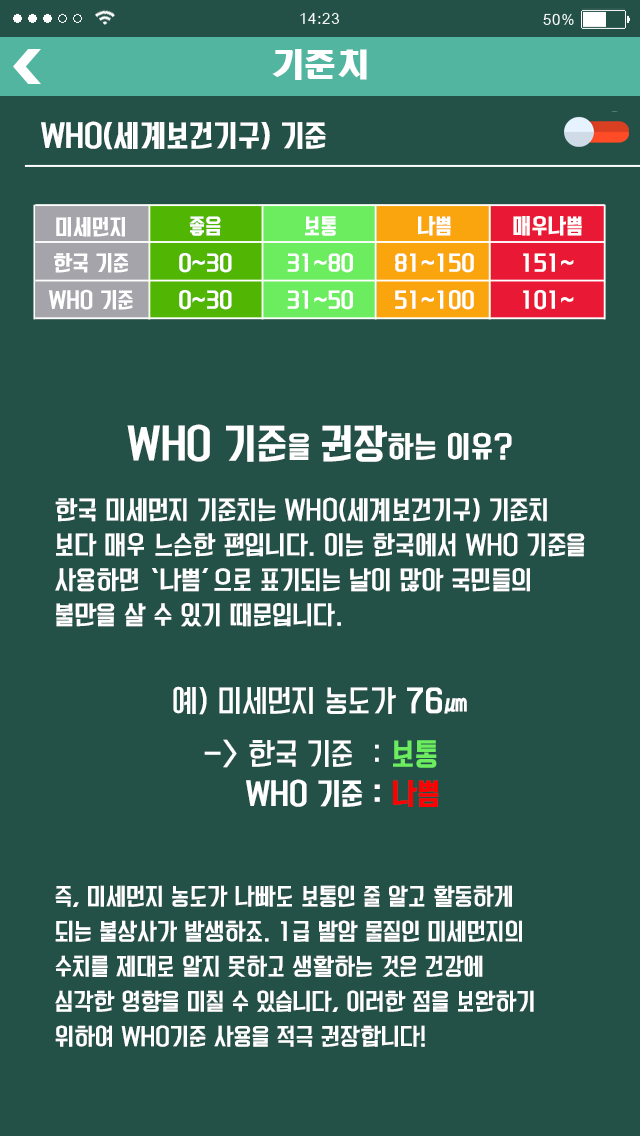
<style>
.page{position:relative;width:640px;height:1136px;background:#245147}
.page>*{position:absolute;margin:0}
.t1{font:32px "HeadlineR-HM";color:#ffffff}
.t2{font:28px "KoreanYNMYT-B";color:#ffffff}
.t3{font:20.2px/36.8px "KoreanYNMYT-B";color:#ffffff}
.t4{font:38px "KoreanYNMYT-B";color:#ffffff}
.t5{font:24px/35px "KoreanYNMYT-M";color:#ffffff}
.t6{font:28px "KoreanYNMYT-L";color:#ffffff}
.t7{font:28px "KoreanYNMYT-L";color:#ffffff;font-weight:bold}
.t8{font:24px "KoreanYNMYT-L";letter-spacing:0.025em;color:#ffffff;font-weight:bold}
.t9{font:28px "KoreanYNMYT-L";color:#6ced5f;font-weight:bold}
.t10{font:28px "KoreanYNMYT-B";color:#ff0000}
.t11{font:22px/35px "KoreanYNMYT-M";color:#ffffff}
</style>
<div class="page">
<p class="t1" style="left:272px;top:49px;width:95px;height:31px">기준치</p>
<p class="t2" style="left:41px;top:121px;width:285px;height:29px">WHO(세계보건기구) 기준</p>
<p class="t3" style="left:48px;top:217px;width:85px;height:93px;text-align:center">미세먼지<br>한국 기준<br>WHO 기준</p>
<p class="t3" style="left:179px;top:216px;width:53px;height:94px;text-align:center">좋음<br>0~30<br>0~30</p>
<p class="t3" style="left:287px;top:216px;width:66px;height:94px;text-align:center">보통<br>31~80<br>31~50</p>
<p class="t3" style="left:395px;top:216px;width:79px;height:94px;text-align:center">나쁨<br>81~150<br>51~100</p>
<p class="t3" style="left:513px;top:216px;width:69px;height:94px;text-align:center">매우나쁨<br>151~<br>101~</p>
<p class="t4" style="left:127px;top:424px;width:385px;height:38px">WHO 기준<span class="t2">을 </span>권장<span class="t2">하는 이유?</span></p>
<p class="t5" style="left:55px;top:497px;width:530px;height:130px">한국 미세먼지 기준치는 WHO(세계보건기구) 기준치<br>보다 매우 느슨한 편입니다. 이는 한국에서 WHO 기준을<br>사용하면 ‘나쁨’으로 표기되는 날이 많아 국민들의<br>불만을 살 수 있기 때문입니다.</p>
<p class="t6" style="left:173px;top:686px;width:294px;height:29px">예) 미세먼지 농도가 <span class="t7">76</span><span class="t8">㎛</span></p>
<p class="t6" style="left:204px;top:739px;width:233px;height:29px">-&gt; 한국 기준  : <span class="t9">보통</span></p>
<p class="t2" style="left:246px;top:779px;width:193px;height:28px">WHO 기준 : <span class="t10">나쁨</span></p>
<p class="t11" style="left:55px;top:885px;width:479px;height:162px">즉, 미세먼지 농도가 나빠도 보통인 줄 알고 활동하게<br>되는 불상사가 발생하죠. 1급 발암 물질인 미세먼지의<br>수치를 제대로 알지 못하고 생활하는 것은 건강에<br>심각한 영향을 미칠 수 있습니다, 이러한 점을 보완하기<br>위하여 WHO기준 사용을 적극 권장합니다!</p>
</div>
